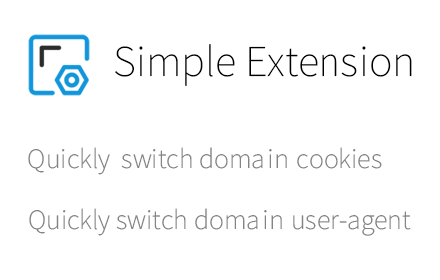
<style>
.page{position:relative;width:440px;height:280px;background:#ffffff}
.page>*{position:absolute;margin:0}
.t1{font:40px "SourceHanSansSCVF-ExtraLight";color:#000000}
.t2{font:25.4px "SourceHanSansSCVF-ExtraLight";color:#848484}
</style>
<div class="page">
<p class="t1" style="left:115px;top:44px;width:297px;height:42px">Simple Extension</p>
<p class="t2" style="left:28px;top:147px;width:354px;height:28px">Quickly  switch domain cookies</p>
<p class="t2" style="left:29px;top:208px;width:382px;height:28px">Quickly switch domain user-agent</p>
</div>
